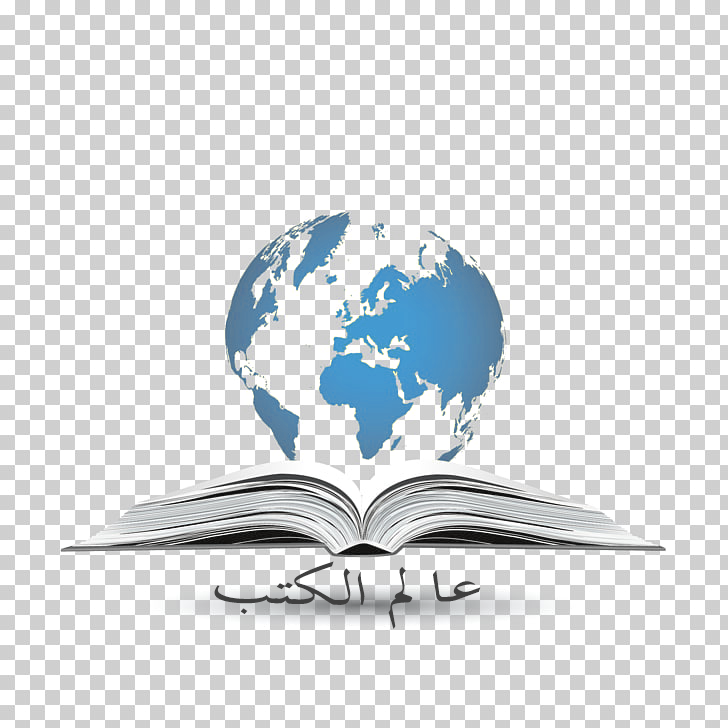
<style>
.page{position:relative;width:728px;height:728px;background:#ffffff}
.page>*{position:absolute;margin:0}
.t1{font:59.8px "TraditionalArabic";color:#3f3f3f;scale:1.56 1}
</style>
<div class="page">
<p class="t1" style="left:214px;top:561px;width:267px;height:68px">عالم الكتب</p>
</div>
